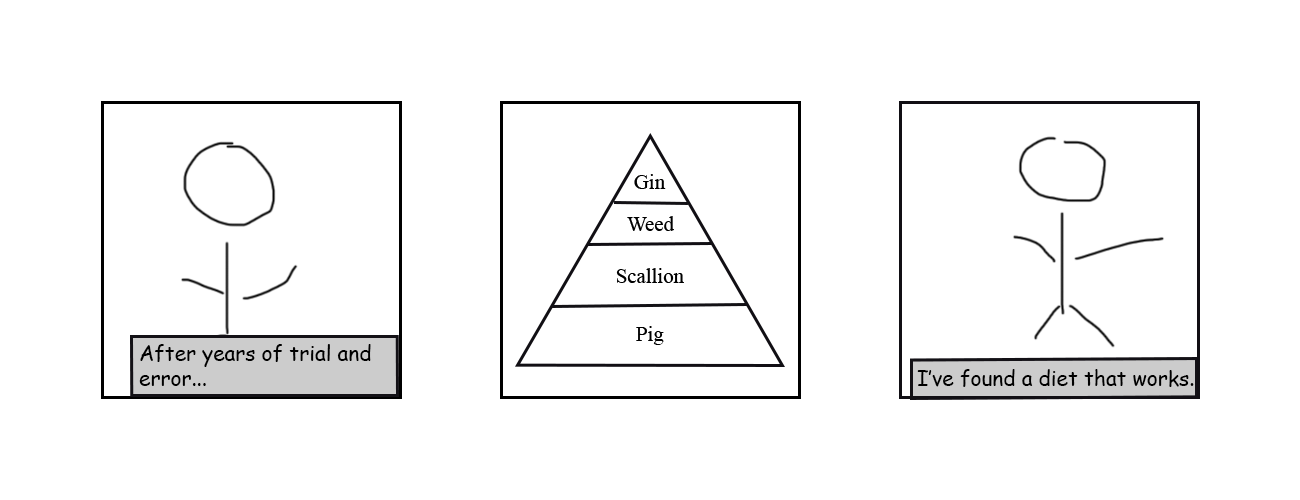
<style>
.page{position:relative;width:1300px;height:500px;background:#ffffff}
.page>*{position:absolute;margin:0}
.t1{font:20.8px "TimesNewRomanPSMT";color:#000000}
.t2{font:20.8px "ComicSansMS";color:#000000}
</style>
<div class="page">
<p class="t1" style="left:634px;top:174px;width:32px;height:15px">Gin</p>
<p class="t1" style="left:627px;top:216px;width:47px;height:15px">Weed</p>
<p class="t1" style="left:616px;top:268px;width:68px;height:15px">Scallion</p>
<p class="t1" style="left:636px;top:326px;width:28px;height:19px">Pig</p>
<p class="t2" style="left:139px;top:344px;width:232px;height:42px">After years of trial and error...</p>
<p class="t2" style="left:917px;top:369px;width:277px;height:18px">I’ve found a diet that works.</p>
</div>
